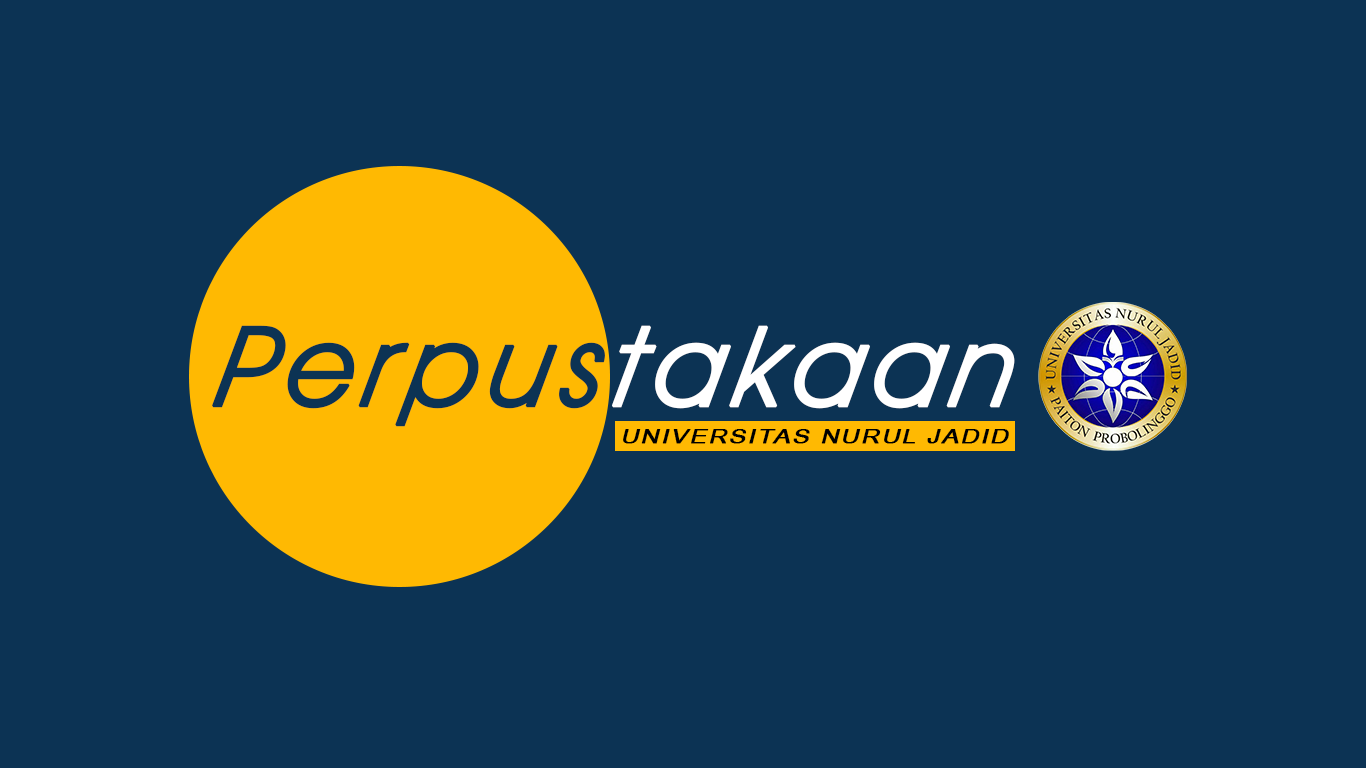
<style>
.page{position:relative;width:1366px;height:768px;background:#0c3354}
.page>*{position:absolute;margin:0}
.t1{font:111.8px "AvantGardeITCbyBT-BookOblique";letter-spacing:0.06em;color:#0c3354;font-weight:bold;font-style:italic}
.t2{font:111.8px "AvantGardeITCbyBT-BookOblique";letter-spacing:0.06em;color:#ffffff;font-weight:bold;font-style:italic}
.t3{font:20.3px "ArialNarrow";letter-spacing:0.06em;color:#000000;font-weight:bold;font-style:italic;scale:1.47 1}
</style>
<div class="page">
<p class="t1" style="left:212px;top:325px;width:803px;height:102px">Perpus<span class="t2">takaan</span></p>
<p class="t3" style="left:623px;top:429px;width:386px;height:15px">UNIVERSITAS NURUL JADID</p>
</div>
